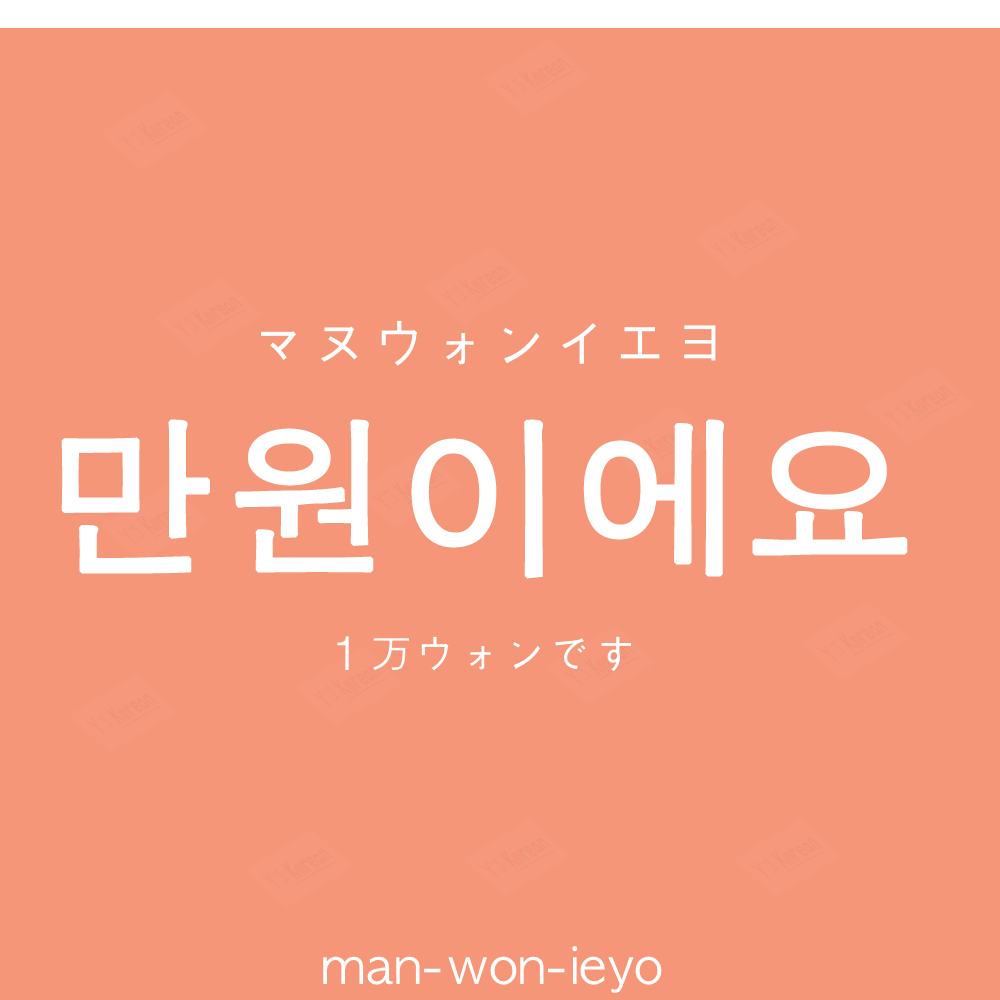
<style>
.page{position:relative;width:1000px;height:1000px;background:#f69679}
.page>*{position:absolute;margin:0}
.t1{font:60px "AppleGothic";color:#ffffff}
.t2{font:170px "AppleGothic";color:#ffffff;font-weight:bold}
.t3{font:45px "AppleGothic";color:#ffffff}
.t4{font:50px "AppleGothic";color:#ffffff}
</style>
<div class="page">
<p class="t1" style="left:261px;top:320px;width:455px;height:46px">マヌウォンイエヨ</p>
<p class="t2" style="left:61px;top:419px;width:847px;height:160px">만원이에요</p>
<p class="t3" style="left:337px;top:636px;width:294px;height:35px">１万ウォンです</p>
<p class="t4" style="left:323px;top:946px;width:339px;height:47px">man-won-ieyo</p>
</div>
